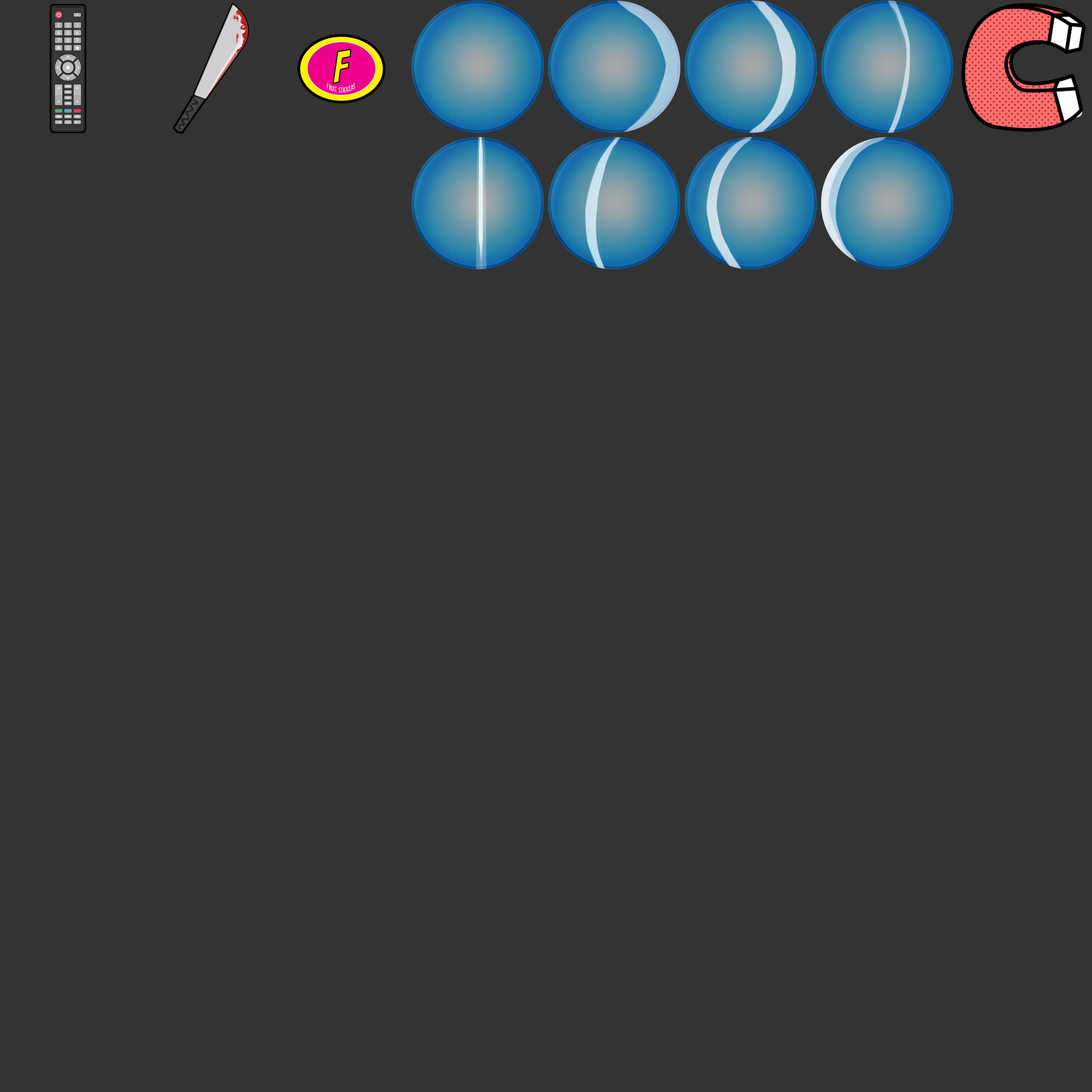
<style>
.page{position:relative;width:1092px;height:1092px;background:#333333}
.page>*{position:absolute;margin:0}
.t1{font:47.5px "BadaBoomBB";color:#fff200;scale:0.88 1}
.t2{font:5.5px "LemonadeStand";color:#ffffff}
</style>
<div class="page">
<p class="t1" style="left:332px;top:49px;width:19px;height:35px">F</p>
<p class="t2" style="left:327px;top:83px;width:28px;height:10px;text-align:center">Fruit Stickers</p>
</div>
